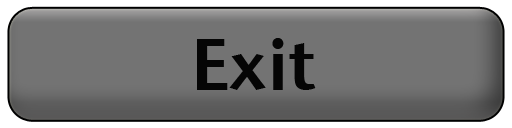
<style>
.page{position:relative;width:512px;height:128px;background:#737373}
.page>*{position:absolute;margin:0}
.t1{font:72px "StoneSansSemOSITCTTSemi";color:#050505}
</style>
<div class="page">
<p class="t1" style="left:197px;top:38px;width:119px;height:52px">Exit</p>
</div>
